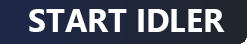
<style>
.page{position:relative;width:247px;height:44px}
.page>*{position:absolute;margin:0}
.t1{font:32px "SegoeUI-Bold";color:#ffffff}
</style>
<div class="page">
<p class="t1" style="left:29px;top:9px;width:196px;height:23px">START IDLER</p>
</div>
